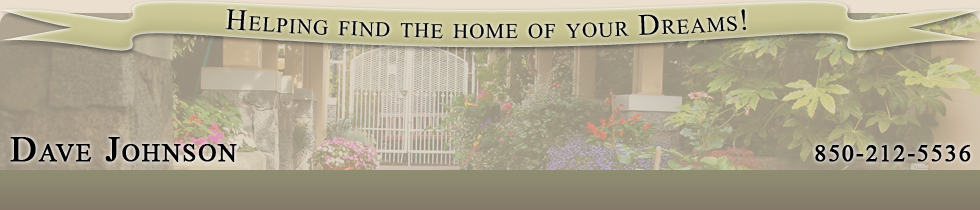
<style>
.page{position:relative;width:980px;height:210px}
.page>*{position:absolute;margin:0}
.t1{font:30px "TimesNewRomanPSMT";letter-spacing:0.05em;color:#000000;font-variant:small-caps}
.t2{font:36px "TimesNewRomanPSMT";letter-spacing:0.05em;color:#000000;font-variant:small-caps;font-weight:bold}
.t3{font:24px "TimesNewRomanPSMT";letter-spacing:0.05em;color:#000000;font-variant:small-caps;font-weight:bold}
</style>
<div class="page">
<p class="t1" style="left:225px;top:9px;width:521px;height:30px">Helping find the home of your Dreams!</p>
<p class="t2" style="left:10px;top:137px;width:227px;height:25px">Dave Johnson</p>
<p class="t3" style="left:815px;top:145px;width:156px;height:17px">850-212-5536</p>
</div>
